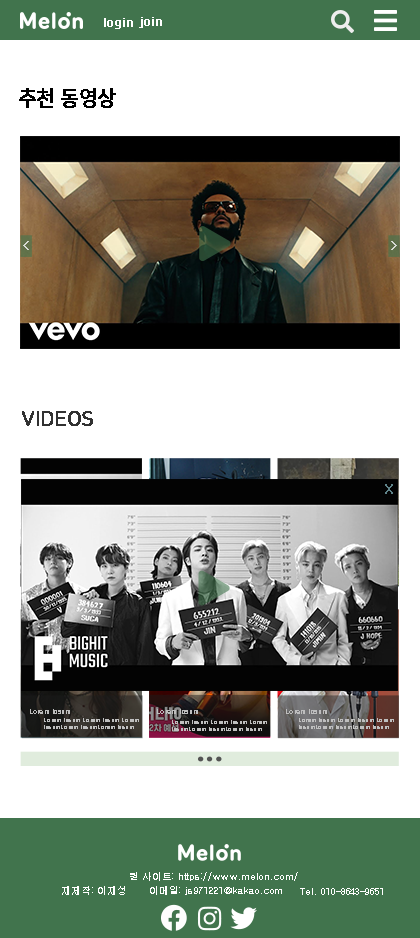
<style>
.page{position:relative;width:420px;height:938px;background:#ffffff}
.page>*{position:absolute;margin:0}
.t1{font:12px "NanumSquareRoundR";letter-spacing:-0.01em;color:#ffffff;font-weight:bold}
.t2{font:20px "NanumSquareRoundR";letter-spacing:-0.01em;color:#000000;font-weight:bold}
.t3{font:13px "Gulim";letter-spacing:-0.01em;color:#d8dbd4;font-weight:bold}
.t4{font:13px "Gulim";letter-spacing:-0.01em;color:#d7dad4;font-weight:bold}
.t5{font:20px "NanumSquareRoundR";letter-spacing:-0.01em;color:#313131;font-weight:bold}
.t6{font:13.5px "Gulim";letter-spacing:-0.01em;color:#5f8389;font-weight:bold}
.t7{font:7.1px "Gulim";letter-spacing:-0.01em;color:#bebebe;font-weight:bold}
.t8{font:6.1px/7.1px "Gulim";letter-spacing:-0.01em;color:#bfbfbf;font-weight:bold}
.t9{font:10px "Gulim";letter-spacing:-0.01em;color:#ffffff}
</style>
<div class="page">
<p class="t1" style="left:139px;top:17px;width:23px;height:11px">join</p>
<p class="t1" style="left:104px;top:18px;width:29px;height:11px">login</p>
<p class="t2" style="left:19px;top:88px;width:97px;height:20px">추천 동영상</p>
<p class="t3" style="left:23px;top:241px;width:6px;height:9px">&lt;</p>
<p class="t4" style="left:391px;top:241px;width:6px;height:9px">&gt;</p>
<p class="t5" style="left:22px;top:411px;width:71px;height:15px">VIDEOS</p>
<p class="t6" style="left:385px;top:484px;width:8px;height:10px">X</p>
<p class="t7" style="left:30px;top:709px;width:40px;height:5px">Lorem Ipsum</p>
<p class="t7" style="left:157px;top:709px;width:41px;height:5px">Lorem Ipsum</p>
<p class="t7" style="left:286px;top:709px;width:41px;height:5px">Lorem Ipsum</p>
<p class="t8" style="left:44px;top:718px;width:95px;height:11px">Lorem Ipsum Lorem Ipsum Lorem <br>IpsumLorem IpsumLorem Ipsum</p>
<p class="t8" style="left:172px;top:720px;width:95px;height:11px">Lorem Ipsum Lorem Ipsum Lorem <br>IpsumLorem IpsumLorem Ipsum</p>
<p class="t8" style="left:299px;top:718px;width:95px;height:11px">Lorem Ipsum Lorem Ipsum Lorem <br>IpsumLorem IpsumLorem Ipsum</p>
<p class="t9" style="left:130px;top:872px;width:168px;height:9px">원 사이트: https://www.melon.com/</p>
<p class="t9" style="left:62px;top:886px;width:63px;height:9px">재제작: 이재성</p>
<p class="t9" style="left:150px;top:886px;width:132px;height:9px">이메일: js971221@kakao.com</p>
<p class="t9" style="left:300px;top:888px;width:83px;height:7px">Tel. 010-8643-9651</p>
</div>
